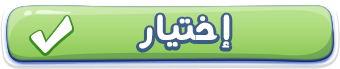
<style>
.page{position:relative;width:340px;height:69px}
.page>*{position:absolute;margin:0}
.t1{font:38px "ANegaar-Bold";letter-spacing:0.02em;color:#ffffff}
</style>
<div class="page">
<p class="t1" style="left:139px;top:14px;width:91px;height:35px">إختيار</p>
</div>
